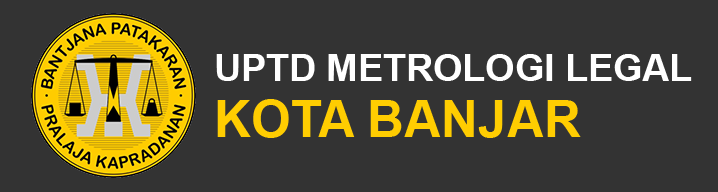
<style>
.page{position:relative;width:718px;height:192px;background:#333333}
.page>*{position:absolute;margin:0}
.t1{font:37.5px/56.2px "Arial-BoldMT";color:#ffffff}
.t2{font:51.1px/56.2px "Arial-BoldMT";color:#ffcd01}
</style>
<div class="page">
<p class="t1" style="left:216px;top:54px;width:476px;height:84px">UPTD METROLOGI LEGAL <br><span class="t2">KOTA BANJAR</span></p>
</div>
